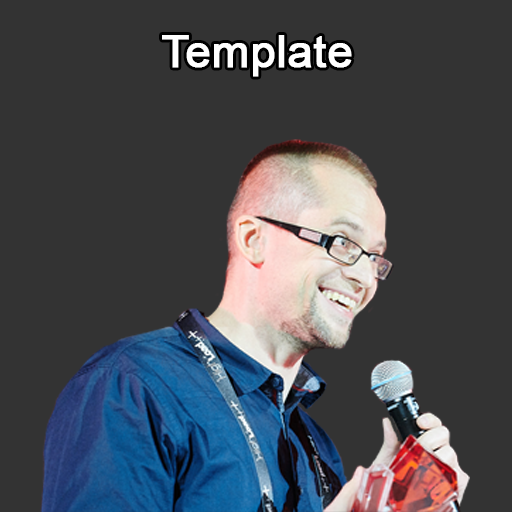
<style>
.page{position:relative;width:512px;height:512px;background:#333333}
.page>*{position:absolute;margin:0}
.t1{font:45px "ArialMT";color:#ffffff;font-weight:bold}
</style>
<div class="page">
<p class="t1" style="left:162px;top:35px;width:190px;height:42px">Template</p>
</div>
